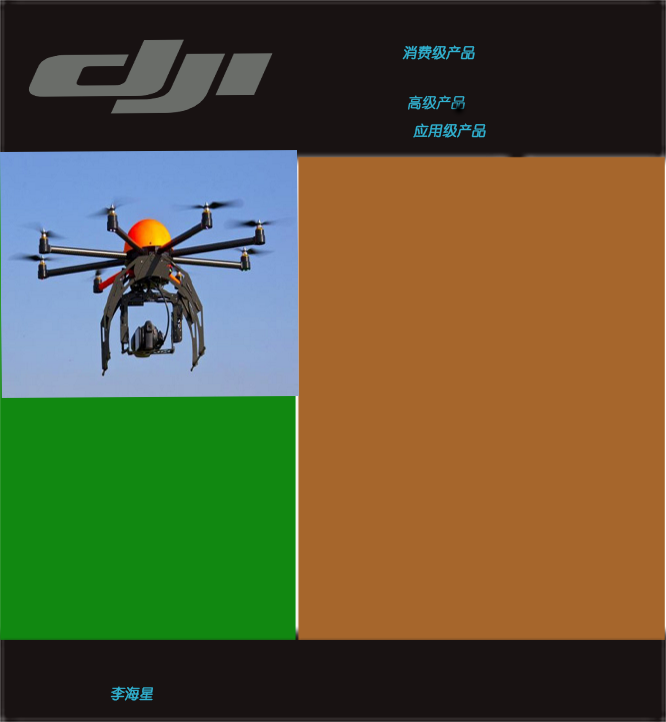
<style>
.page{position:relative;width:666px;height:722px;background:#a6662c}
.page>*{position:absolute;margin:0}
.t1{font:14px "YouYuan";letter-spacing:0.005em;color:#31b2d1;font-weight:bold;font-style:italic}
</style>
<div class="page">
<p class="t1" style="left:402px;top:45px;width:73px;height:15px">消费级产品</p>
<p class="t1" style="left:413px;top:123px;width:73px;height:15px">应用级产品</p>
<p class="t1" style="left:110px;top:686px;width:43px;height:15px">李海星</p>
</div>
